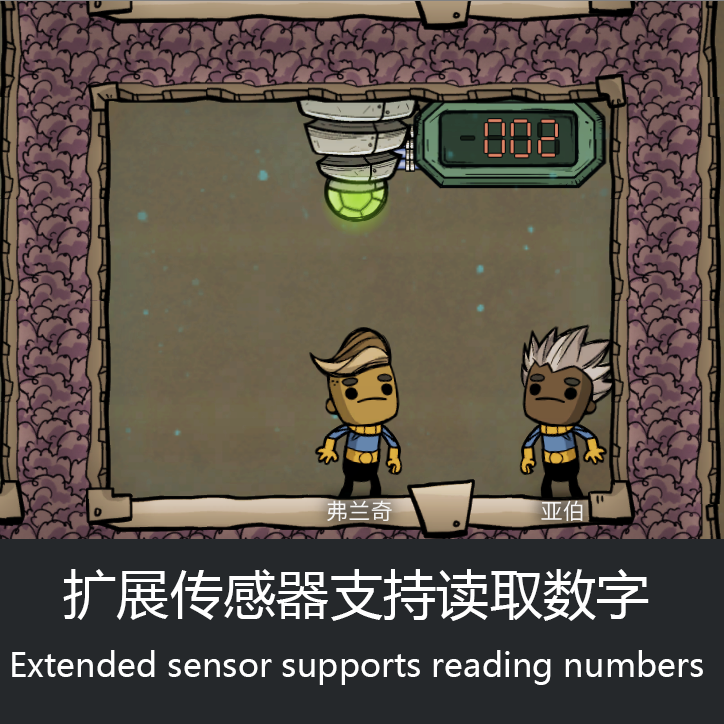
<style>
.page{position:relative;width:724px;height:724px;background:#25282b}
.page>*{position:absolute;margin:0}
.t1{font:33.3px/64px "MicrosoftYaHei";color:#ffffff}
.t2{font:53.3px/64px "MicrosoftYaHei";color:#ffffff}
</style>
<div class="page">
<p class="t1" style="left:12px;top:569px;width:691px;height:116px;text-align:center"><span class="t2">扩展传感器支持读取数字<br></span>Extended sensor supports reading numbers</p>
</div>
